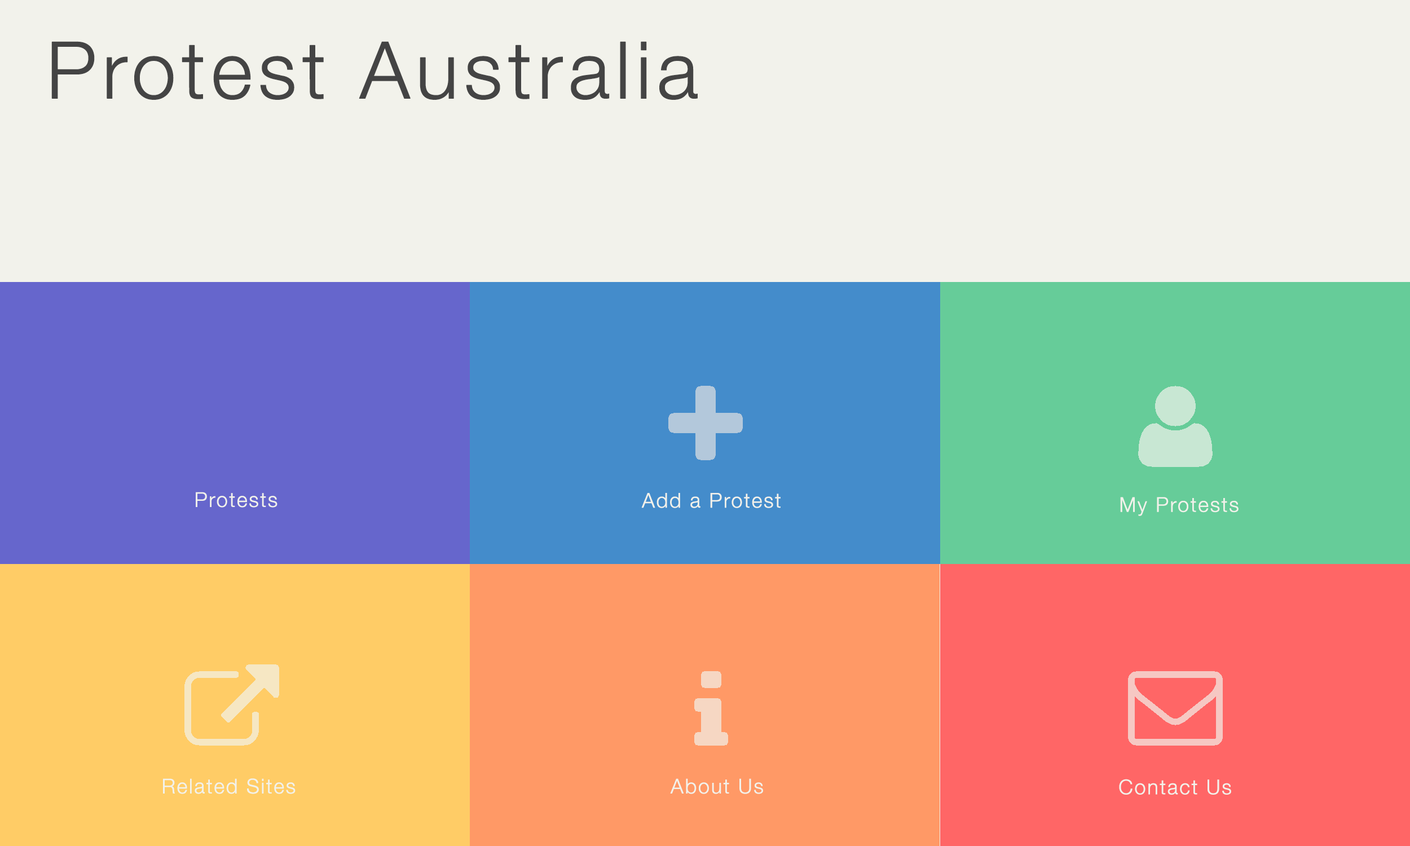
<style>
.page{position:relative;width:1410px;height:846px;background:#f2f2eb}
.page>*{position:absolute;margin:0}
.t1{font:78.9px "HelveticaNeue-Light";letter-spacing:0.05em;color:#444444;font-weight:bold}
.t2{font:20.3px "HelveticaNeue-Light";letter-spacing:0.05em;color:#f2f2eb;font-weight:bold}
</style>
<div class="page">
<p class="t1" style="left:51px;top:41px;width:647px;height:59px">Protest Australia</p>
<p class="t2" style="left:196px;top:492px;width:81px;height:16px">Protests</p>
<p class="t2" style="left:641px;top:493px;width:139px;height:15px">Add a Protest</p>
<p class="t2" style="left:1120px;top:497px;width:118px;height:19px">My Protests</p>
<p class="t2" style="left:163px;top:778px;width:132px;height:16px">Related Sites</p>
<p class="t2" style="left:670px;top:778px;width:93px;height:16px">About Us</p>
<p class="t2" style="left:1119px;top:779px;width:112px;height:16px">Contact Us</p>
</div>
